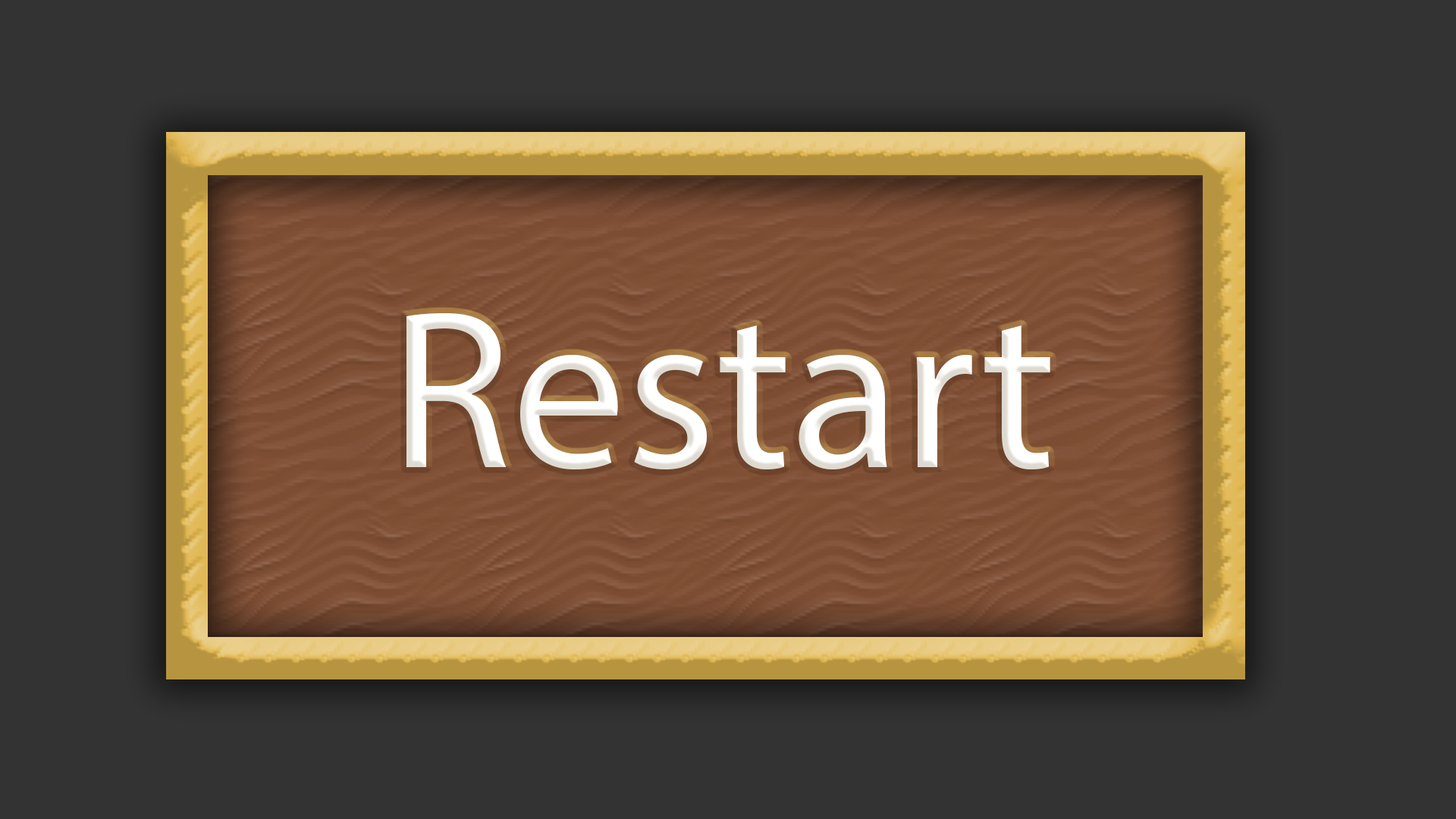
<style>
.page{position:relative;width:1456px;height:819px;background:#333333}
.page>*{position:absolute;margin:0}
.t1{font:227.5px "MyriadPro-Regular";color:#ffffff}
</style>
<div class="page">
<p class="t1" style="left:406px;top:313px;width:644px;height:157px">Restart</p>
</div>
